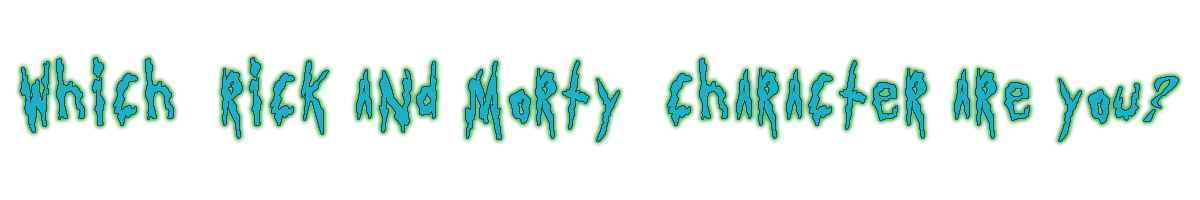
<style>
.page{position:relative;width:1200px;height:200px;background:#ffffff}
.page>*{position:absolute;margin:0}
.t1{font:59px "GetSchwifty-Regular";letter-spacing:0.04em;color:#1eb0c7}
.t2{font:59px "BansheeStd";letter-spacing:0.04em;color:#1eb0c7}
</style>
<div class="page">
<p class="t1" style="left:21px;top:58px;width:1157px;height:83px">Which "Rick and Morty" Character Are You<span class="t2">?</span></p>
</div>
